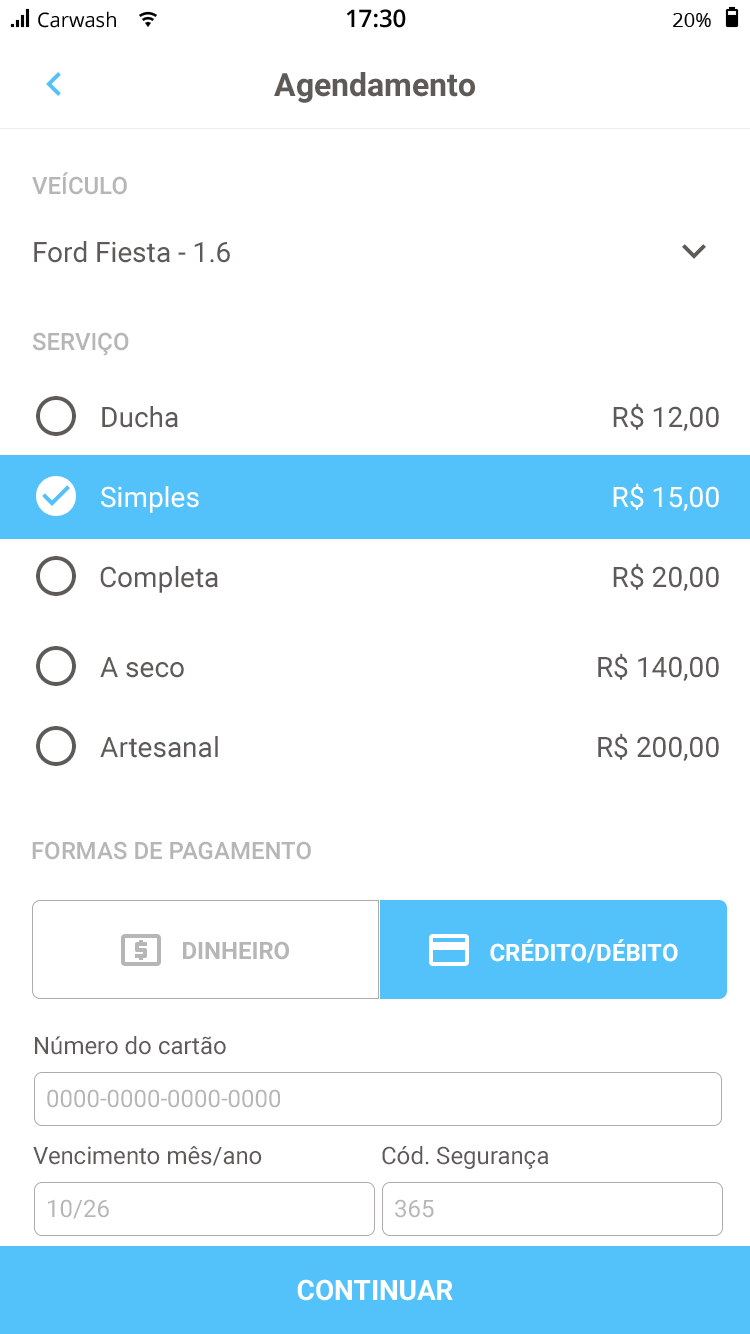
<style>
.page{position:relative;width:750px;height:1334px;background:#ffffff}
.page>*{position:absolute;margin:0}
.t1{font:24px "Roboto-Medium";color:#b7b6b6;text-transform:uppercase}
.t2{font:28px "Roboto-Regular";color:#5d5a58}
.t3{font:28px "Roboto-Regular";color:#ffffff}
.t4{font:24px "Roboto-Bold";color:#b7b6b6;text-transform:uppercase}
.t5{font:24px "Roboto-Bold";color:#ffffff;text-transform:uppercase}
.t6{font:24px "Roboto-Regular";color:#5d5a58}
.t7{font:24px "Roboto-Regular";color:#b7b6b6}
</style>
<div class="page">
<p class="t1" style="left:32px;top:172px;width:95px;height:23px">veículo</p>
<p class="t2" style="left:34px;top:241px;width:196px;height:22px">Ford Fiesta - 1.6</p>
<p class="t1" style="left:32px;top:332px;width:97px;height:24px">serviço</p>
<p class="t2" style="left:102px;top:406px;width:76px;height:22px">Ducha</p>
<p class="t2" style="left:613px;top:403px;width:106px;height:28px">R$ 12,00</p>
<p class="t3" style="left:101px;top:486px;width:98px;height:27px">Simples</p>
<p class="t3" style="left:613px;top:483px;width:106px;height:28px">R$ 15,00</p>
<p class="t2" style="left:100px;top:566px;width:118px;height:27px">Completa</p>
<p class="t2" style="left:613px;top:563px;width:106px;height:28px">R$ 20,00</p>
<p class="t2" style="left:598px;top:653px;width:121px;height:28px">R$ 140,00</p>
<p class="t2" style="left:100px;top:657px;width:84px;height:21px">A seco</p>
<p class="t2" style="left:100px;top:736px;width:118px;height:22px">Artesanal</p>
<p class="t2" style="left:598px;top:733px;width:121px;height:28px">R$ 200,00</p>
<p class="t1" style="left:32px;top:841px;width:279px;height:19px">Formas de Pagamento</p>
<p class="t4" style="left:183px;top:941px;width:106px;height:19px">Dinheiro</p>
<p class="t5" style="left:490px;top:939px;width:188px;height:24px">Crédito/Débito</p>
<p class="t6" style="left:35px;top:1036px;width:191px;height:19px">Número do cartão</p>
<p class="t7" style="left:47px;top:1089px;width:233px;height:19px">0000-0000-0000-0000</p>
<p class="t6" style="left:33px;top:1146px;width:229px;height:20px">Vencimento mês/ano</p>
<p class="t6" style="left:382px;top:1146px;width:167px;height:23px">Cód. Segurança</p>
<p class="t7" style="left:48px;top:1199px;width:61px;height:20px">10/26</p>
<p class="t7" style="left:395px;top:1199px;width:39px;height:19px">365</p>
</div>
